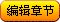
<style>
.page{position:relative;width:60px;height:22px}
.page>*{position:absolute;margin:0}
.t1{font:12px "SimSun";color:#000000}
</style>
<div class="page">
<p class="t1" style="left:7px;top:5px;width:47px;height:11px">编辑章节</p>
</div>
